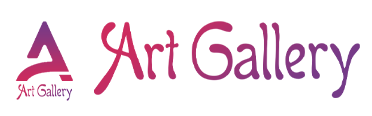
<style>
.page{position:relative;width:372px;height:116px;background:#ffffff}
.page>*{position:absolute;margin:0}
.t1{font:94.6px "Boomerang"}
.t2{font:19.9px "Boomerang"}
</style>
<div class="page">
<p class="t1" style="left:94px;top:21px;width:266px;height:77px">Art Gallery</p>
<p class="t2" style="left:16px;top:84px;width:56px;height:17px">Art Gallery</p>
</div>
